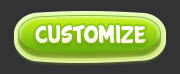
<style>
.page{position:relative;width:180px;height:74px;background:#333333}
.page>*{position:absolute;margin:0}
.t1{font:25px "Cartwheel";color:#ffffff}
</style>
<div class="page">
<p class="t1" style="left:35px;top:25px;width:111px;height:18px">CUSTOMIZE</p>
</div>
